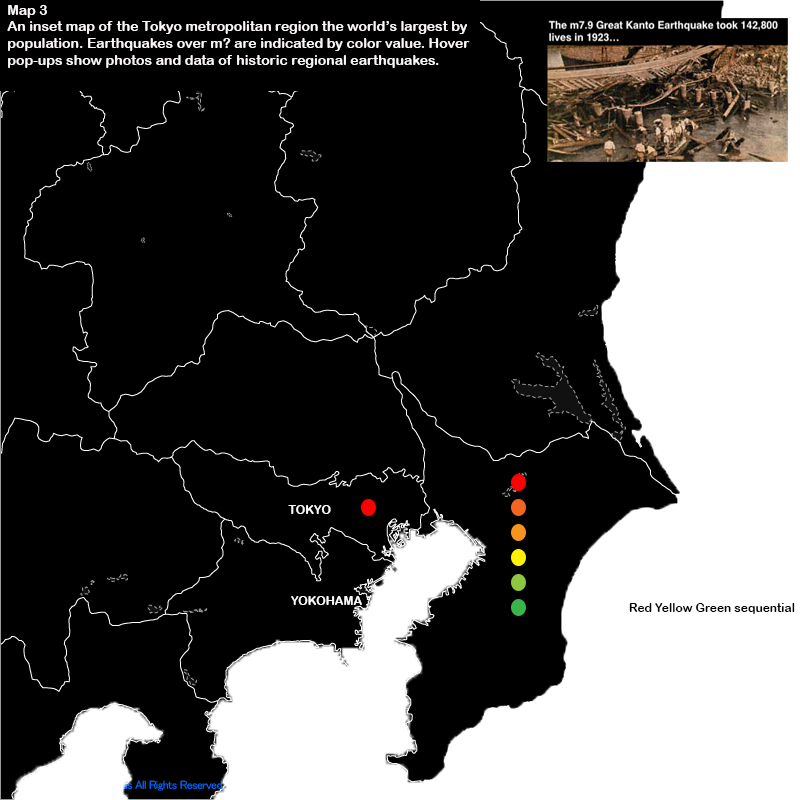
<style>
.page{position:relative;width:800px;height:800px;background:#000000}
.page>*{position:absolute;margin:0}
.t1{font:14px "ArialRoundedMTBold";color:#faf6f6}
.t2{font:12px "ArialRoundedMTBold";color:#fcfafa}
.t3{font:12px "ArialRoundedMTBold";color:#060000}
</style>
<div class="page">
<p class="t1" style="left:7px;top:5px;width:463px;height:63px">Map 3<br>An inset map of the Tokyo metropolitan region the world’s largest by<br>population. Earthquakes over m? are indicated by color value. Hover<br>pop-ups show photos and data of historic regional earthquakes.</p>
<p class="t2" style="left:288px;top:505px;width:43px;height:9px">TOKYO</p>
<p class="t2" style="left:291px;top:596px;width:71px;height:9px">YOKOHAMA</p>
<p class="t3" style="left:629px;top:603px;width:166px;height:11px">Red Yellow Green sequential</p>
</div>
